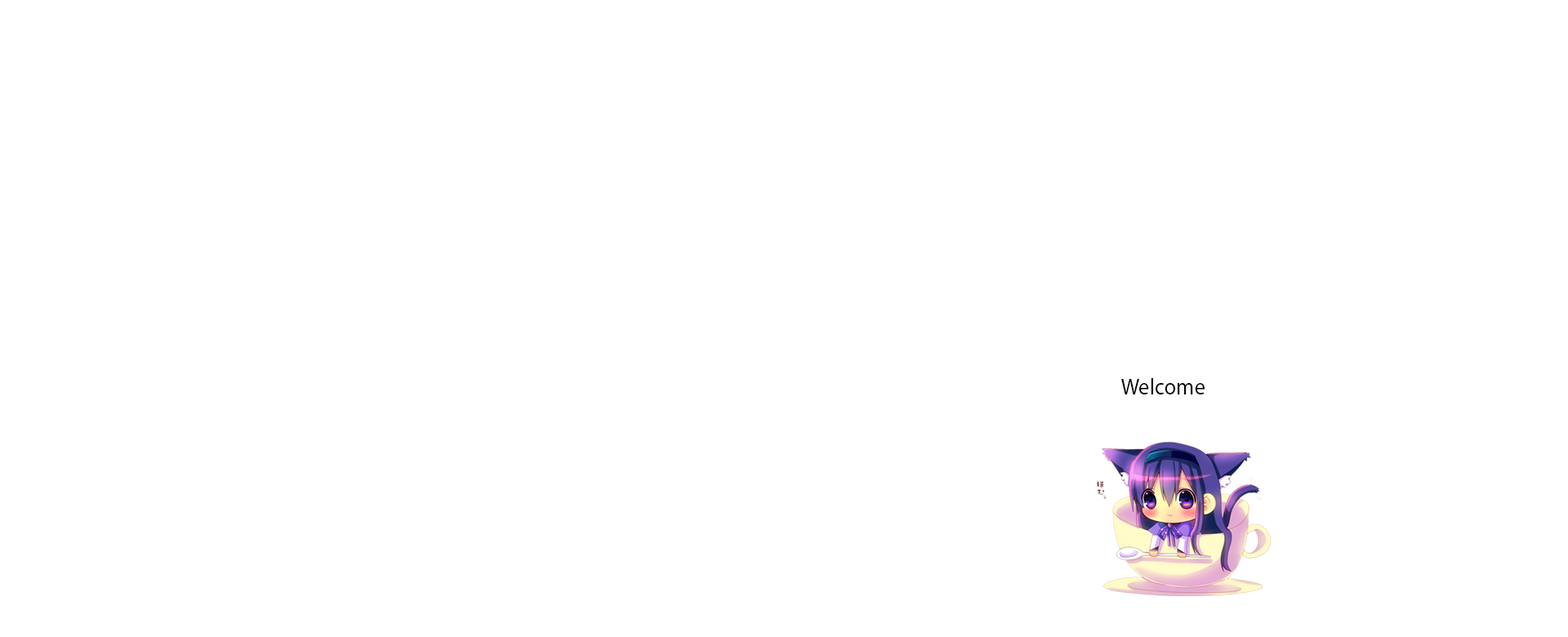
<style>
.page{position:relative;width:1568px;height:637px;background:#ffffff}
.page>*{position:absolute;margin:0}
.t1{font:22.9px "MyriadPro-Regular";color:#060606;scale:0.95 1}
</style>
<div class="page">
<p class="t1" style="left:1121px;top:378px;width:84px;height:16px">Welcome</p>
</div>
